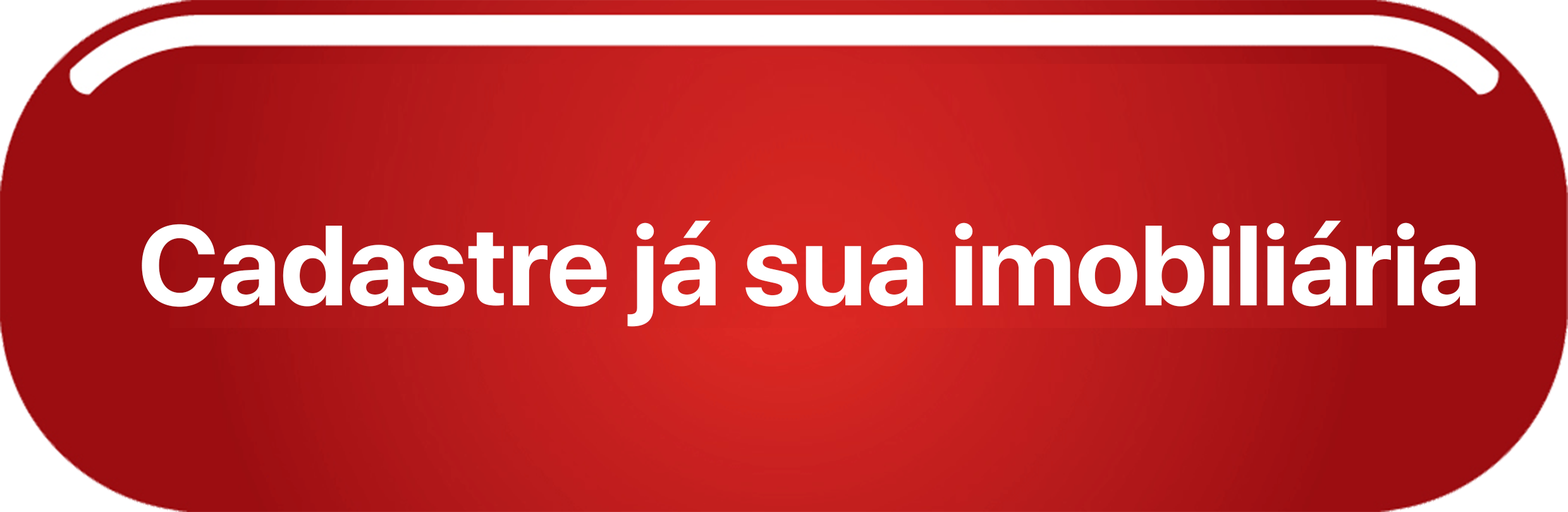
<style>
.page{position:relative;width:1568px;height:512px}
.page>*{position:absolute;margin:0}
.t1{font:113px "SFProDisplay-Bold";color:#ffffff}
</style>
<div class="page">
<p class="t1" style="left:142px;top:221px;width:1334px;height:106px">Cadastre já sua imobiliária</p>
</div>
